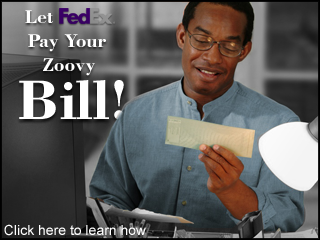
<style>
.page{position:relative;width:320px;height:240px}
.page>*{position:absolute;margin:0}
.t1{font:19.6px "BodoniBT-Bold";color:#ffffff}
.t2{font:58.8px "BodoniBT-Bold";color:#ffffff}
.t3{font:14px "ArialMT";color:#ffffff}
</style>
<div class="page">
<p class="t1" style="left:25px;top:10px;width:81px;height:66px;text-align:center">Let           <br>Pay Your <br>Zoovy</p>
<p class="t2" style="left:19px;top:80px;width:105px;height:40px">Bill!</p>
<p class="t3" style="left:4px;top:224px;width:142px;height:12px">Click here to learn how</p>
</div>
